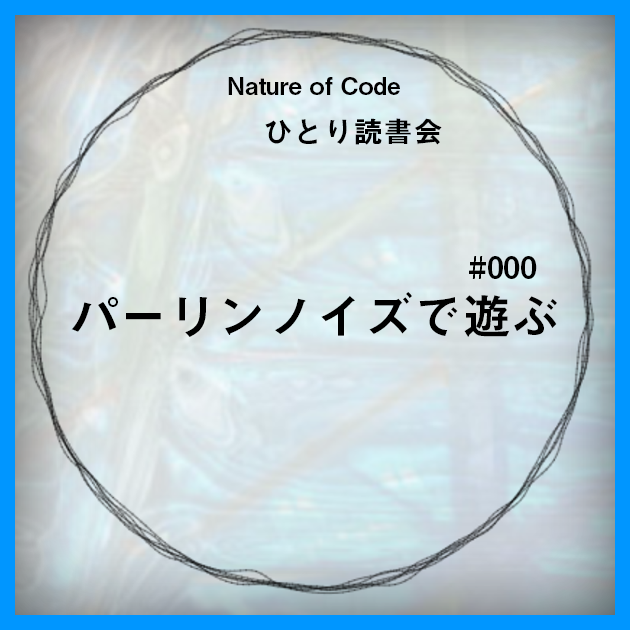
<style>
.page{position:relative;width:630px;height:630px}
.page>*{position:absolute;margin:0}
.t1{font:24px "MidashiGoPr6N-MB31";color:#000000}
.t2{font:30px "MidashiGoPr6N-MB31";color:#000000}
.t3{font:49px "MidashiGoPr6N-MB31";color:#000000}
</style>
<div class="page">
<p class="t1" style="left:228px;top:77px;width:172px;height:18px">Nature of Code</p>
<p class="t2" style="left:265px;top:118px;width:177px;height:27px">ひとり読書会</p>
<p class="t2" style="left:469px;top:256px;width:68px;height:23px">#000</p>
<p class="t3" style="left:71px;top:292px;width:486px;height:45px">パーリンノイズで遊ぶ</p>
</div>
